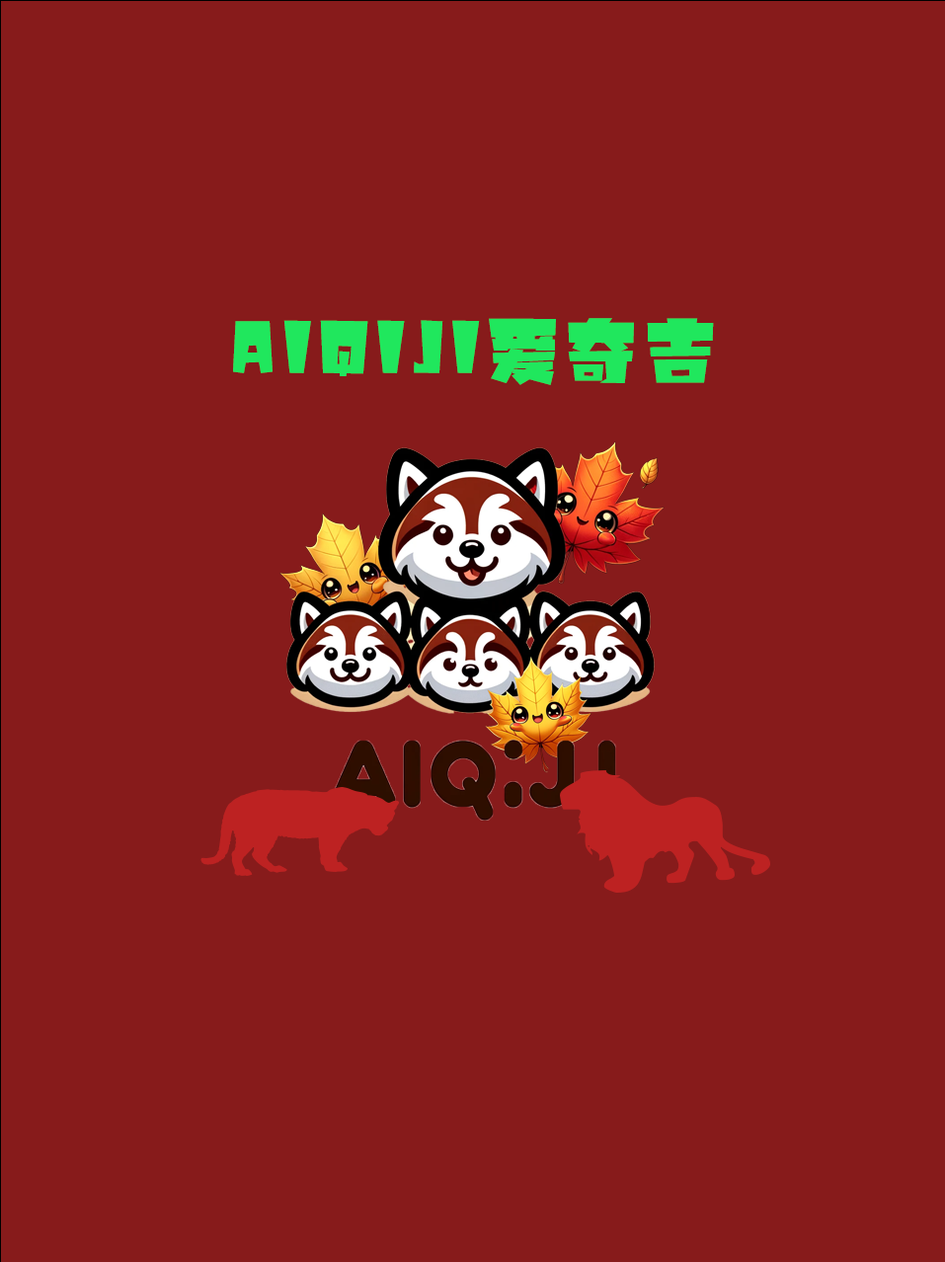
<style>
.page{position:relative;width:945px;height:1262px;background:#871b1b}
.page>*{position:absolute;margin:0}
.t1{font:74.1px "zihun18hao-xiaokonglong";letter-spacing:0.04em;color:#20e75d}
</style>
<div class="page">
<p class="t1" style="left:233px;top:318px;width:481px;height:67px">AIQIJI爱奇吉</p>
</div>
